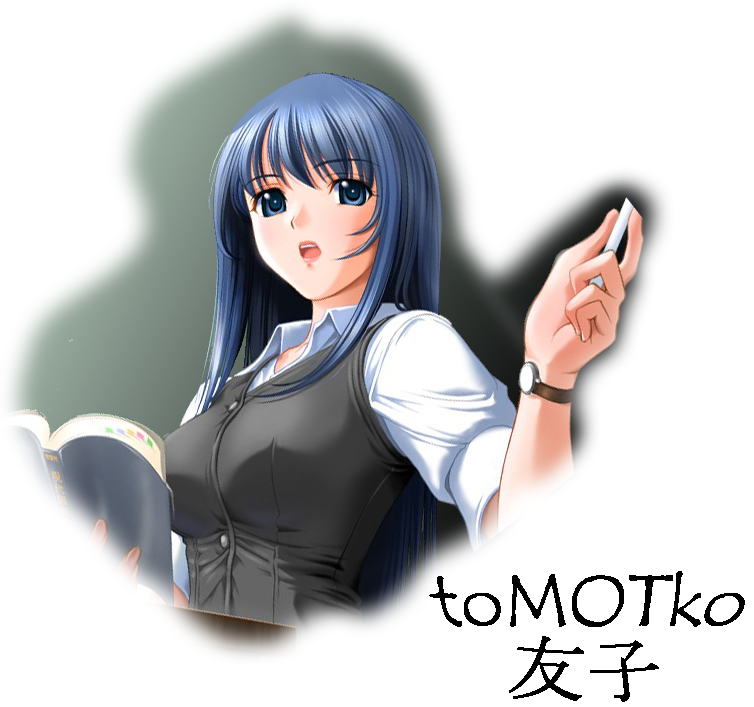
<style>
.page{position:relative;width:754px;height:707px;background:#ffffff}
.page>*{position:absolute;margin:0}
.t1{font:72px "TempusSansITC";color:#000000}
.t2{font:72px "MS-PMincho";color:#000000}
</style>
<div class="page">
<p class="t1" style="left:429px;top:571px;width:316px;height:56px">toMOTko</p>
<p class="t2" style="left:509px;top:636px;width:150px;height:66px">友子</p>
</div>
